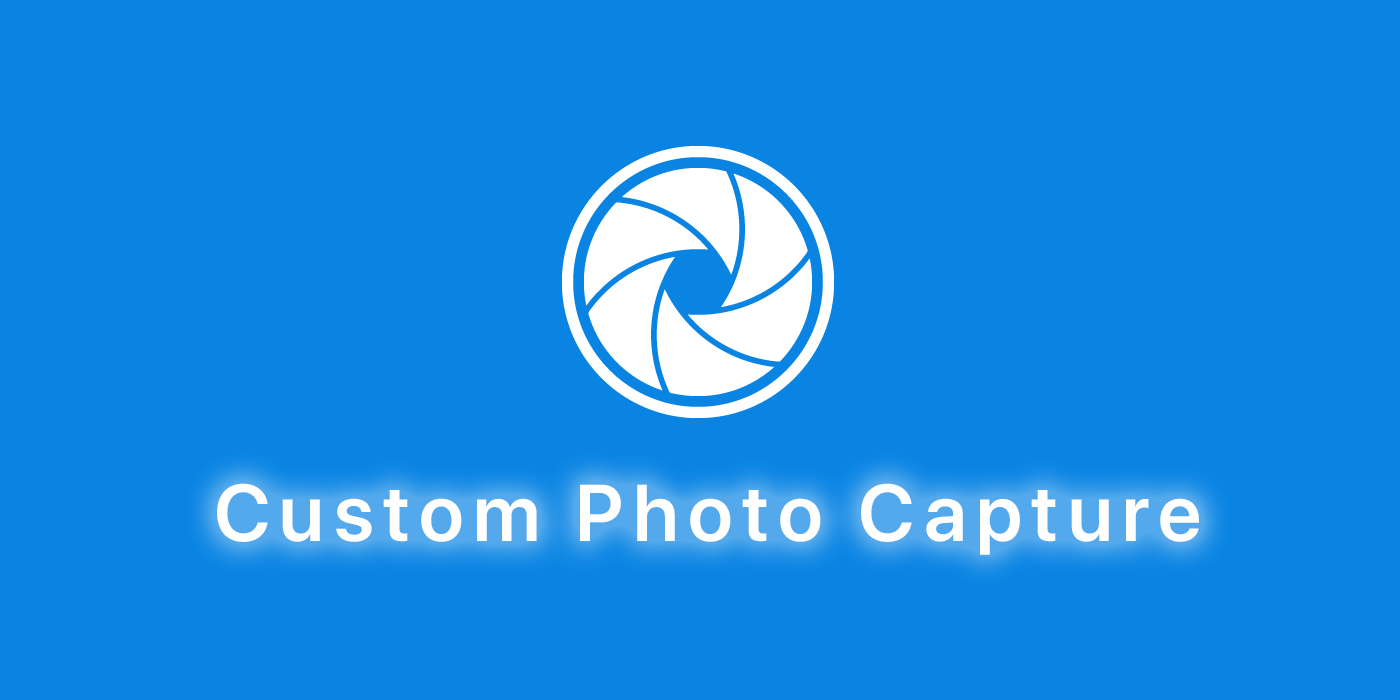
<style>
.page{position:relative;width:1400px;height:700px;background:#0984e3}
.page>*{position:absolute;margin:0}
.t1{font:80px "SFProDisplay-Semibold";letter-spacing:0.12em;color:#ffffff}
</style>
<div class="page">
<p class="t1" style="left:217px;top:483px;width:982px;height:72px">Custom Photo Capture</p>
</div>
